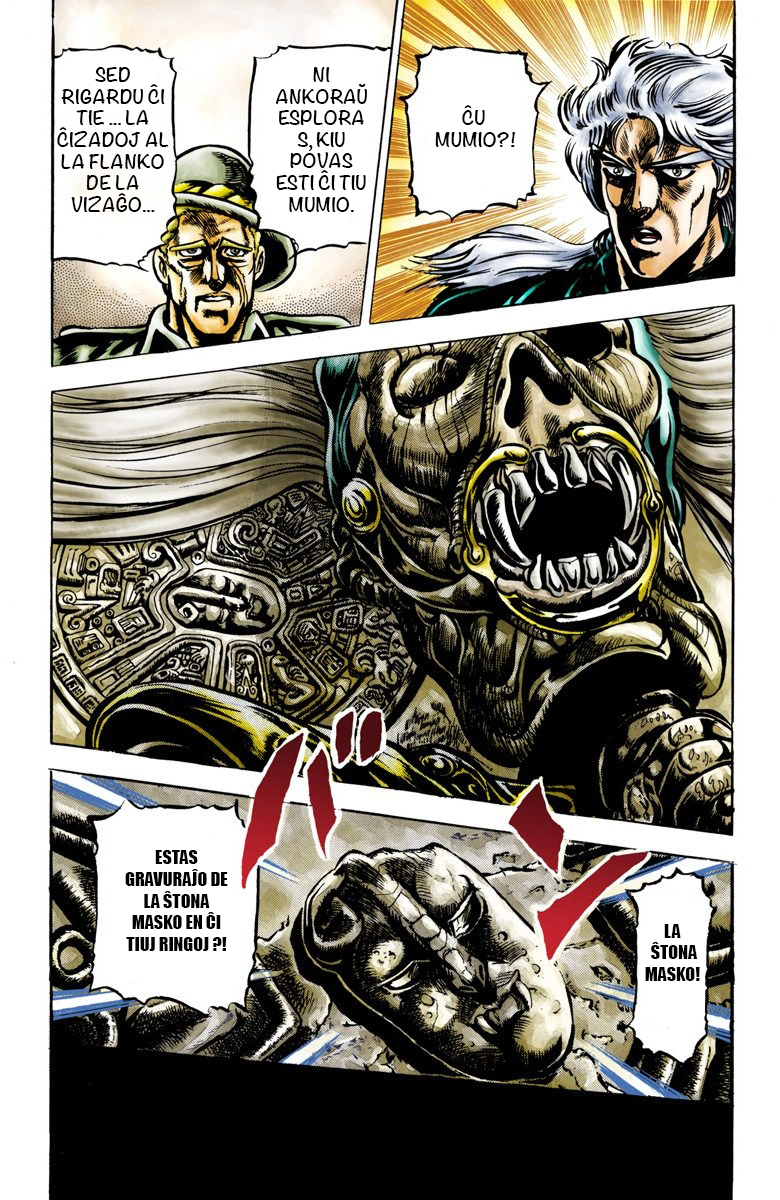
<style>
.page{position:relative;width:780px;height:1200px;background:#ffffff}
.page>*{position:absolute;margin:0}
.t1{font:18px "Noteworthy-Bold";color:#000000}
.t2{font:18px "Impact";color:#000000}
</style>
<div class="page">
<p class="t1" style="left:57px;top:67px;width:112px;height:145px;text-align:center">SED RIGARDU ĈI TIE ... LA ĈIZADOJ AL LA FLANKO DE LA VIZAĜO...</p>
<p class="t1" style="left:275px;top:67px;width:92px;height:145px;text-align:center">NI ANKORAŬ ESPLORAS, KIU POVAS ESTI ĈI TIU MUMIO.</p>
<p class="t1" style="left:435px;top:105px;width:81px;height:42px;text-align:center">ĈU<br> MUMIO?!</p>
<p class="t2" style="left:125px;top:850px;width:103px;height:101px;text-align:center">ESTAS GRAVURAĴO DE LA ŜTONA MASKO EN ĈI TIUJ RINGOJ ?!</p>
<p class="t2" style="left:645px;top:924px;width:55px;height:57px;text-align:center">LA<br> ŜTONA MASKO!</p>
</div>
